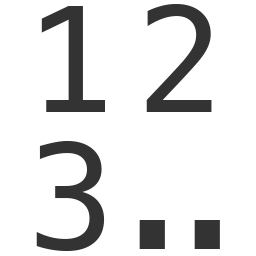
<style>
.page{position:relative;width:256px;height:256px;background:#ffffff}
.page>*{position:absolute;margin:0}
.t1{font:146px/137px "Menlo-Regular";letter-spacing:-0.23em;color:#333333}
</style>
<div class="page">
<p class="t1" style="left:36px;top:4px;width:184px;height:247px">1 2<br>3 ..</p>
</div>
